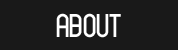
<style>
.page{position:relative;width:178px;height:50px;background:#191919}
.page>*{position:absolute;margin:0}
.t1{font:35.9px "Rothwell";color:#ffffff}
</style>
<div class="page">
<p class="t1" style="left:56px;top:13px;width:65px;height:25px">AbouT</p>
</div>
